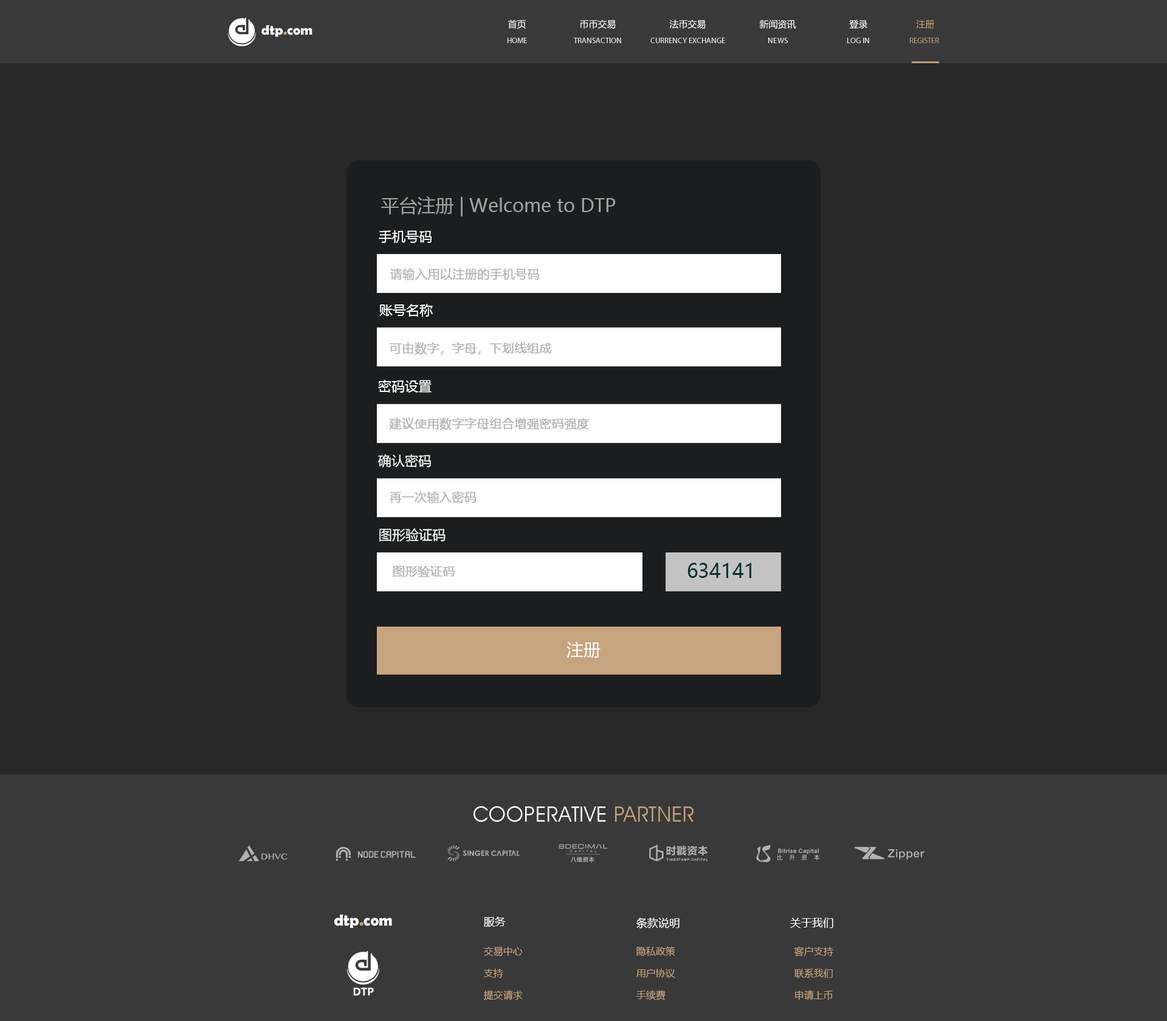
<style>
.page{position:relative;width:1167px;height:1021px;background:#272727}
.page>*{position:absolute;margin:0}
.t1{font:13.7px "BerlinSansFBDemi-Bold";color:#ffffff}
.t2{font:13.7px "BerlinSansFBDemi-Bold";color:#c5a47e}
.t3{font:9.1px "MicrosoftYaHei";color:#ffffff}
.t4{font:9.1px "MicrosoftYaHei";color:#c5a47e}
.t5{font:7.9px "MyriadPro-Regular";color:#ffffff;text-transform:uppercase}
.t6{font:7.9px "MyriadPro-Regular";color:#c5a47e;text-transform:uppercase}
.t7{font:18.2px "MicrosoftYaHei";color:#a2a2a2}
.t8{font:13.4px "MicrosoftYaHei";color:#ffffff}
.t9{font:12.1px "MicrosoftYaHei";color:#b6b6b6;font-weight:bold}
.t10{font:12.2px "MicrosoftYaHei";color:#b6b6b6;font-weight:bold}
.t11{font:13.5px "MicrosoftYaHei";color:#ffffff}
.t12{font:19.7px "MicrosoftYaHei";color:#033333}
.t13{font:17px "MicrosoftYaHei";color:#ffffff}
.t14{font:21.3px "AvantGardeITCbyBT-Book";letter-spacing:0.02em;color:#ffffff;text-transform:uppercase}
.t15{font:21.3px "AvantGardeITCbyBT-Book";letter-spacing:0.02em;color:#c5a47e;text-transform:uppercase}
.t16{font:15.9px "BerlinSansFBDemi-Bold";color:#ffffff}
.t17{font:15.9px "BerlinSansFBDemi-Bold";color:#c5a47e}
.t18{font:10.9px "MicrosoftYaHei";color:#ffffff}
.t19{font:9.7px "MicrosoftYaHei";color:#c5a47e}
.t20{font:11.1px "Ebrima-Bold";color:#ffffff}
</style>
<div class="page">
<p class="t1" style="left:261px;top:25px;width:52px;height:12px">dtp<span class="t2">.</span>com</p>
<p class="t3" style="left:508px;top:19px;width:427px;height:10px">首页                      币币交易                      法币交易                      新闻资讯                      登录                    <span class="t4">注册</span></p>
<p class="t5" style="left:508px;top:38px;width:19px;height:5px">home</p>
<p class="t5" style="left:573px;top:38px;width:48px;height:5px">transaction</p>
<p class="t5" style="left:651px;top:38px;width:74px;height:5px">Currency exchange</p>
<p class="t5" style="left:769px;top:38px;width:19px;height:5px">News</p>
<p class="t5" style="left:848px;top:38px;width:21px;height:5px">log in</p>
<p class="t6" style="left:910px;top:38px;width:29px;height:5px">register</p>
<p class="t7" style="left:381px;top:196px;width:235px;height:20px">平台注册 | Welcome to DTP</p>
<p class="t8" style="left:379px;top:230px;width:53px;height:13px">手机号码</p>
<p class="t9" style="left:390px;top:268px;width:149px;height:12px">请输入用以注册的手机号码</p>
<p class="t8" style="left:379px;top:304px;width:54px;height:13px">账号名称</p>
<p class="t10" style="left:389px;top:342px;width:163px;height:13px">可由数字，字母，下划线组成</p>
<p class="t8" style="left:378px;top:380px;width:54px;height:13px">密码设置</p>
<p class="t10" style="left:389px;top:418px;width:200px;height:12px">建议使用数字字母组合增强密码强度</p>
<p class="t8" style="left:378px;top:454px;width:53px;height:14px">确认密码</p>
<p class="t9" style="left:390px;top:491px;width:87px;height:12px">再一次输入密码</p>
<p class="t11" style="left:379px;top:528px;width:67px;height:14px">图形验证码</p>
<p class="t10" style="left:393px;top:566px;width:62px;height:12px">图形验证码</p>
<p class="t12" style="left:688px;top:563px;width:64px;height:15px">634141</p>
<p class="t13" style="left:567px;top:641px;width:34px;height:17px">注册</p>
<p class="t14" style="left:474px;top:806px;width:220px;height:17px">Cooperative <span class="t15">partner</span></p>
<p class="t16" style="left:334px;top:914px;width:58px;height:14px">dtp<span class="t17">.</span>com</p>
<p class="t18" style="left:484px;top:917px;width:22px;height:10px">服务</p>
<p class="t18" style="left:637px;top:917px;width:43px;height:12px">条款说明</p>
<p class="t18" style="left:790px;top:918px;width:44px;height:10px">关于我们</p>
<p class="t19" style="left:484px;top:947px;width:39px;height:10px">交易中心</p>
<p class="t19" style="left:637px;top:947px;width:39px;height:10px">隐私政策</p>
<p class="t19" style="left:794px;top:947px;width:40px;height:10px">客户支持</p>
<p class="t19" style="left:484px;top:969px;width:19px;height:9px">支持</p>
<p class="t19" style="left:637px;top:969px;width:39px;height:9px">用户协议</p>
<p class="t19" style="left:795px;top:969px;width:38px;height:10px">联系我们</p>
<p class="t20" style="left:353px;top:988px;width:21px;height:8px">DTP</p>
<p class="t19" style="left:484px;top:990px;width:39px;height:11px">提交请求</p>
<p class="t19" style="left:637px;top:990px;width:29px;height:11px">手续费</p>
<p class="t19" style="left:795px;top:990px;width:38px;height:10px">申请上币</p>
</div>
